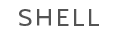
<style>
.page{position:relative;width:115px;height:35px;background:#ffffff}
.page>*{position:absolute;margin:0}
.t1{font:24px "Cabin-Regular";letter-spacing:0.12em;color:#545454}
</style>
<div class="page">
<p class="t1" style="left:19px;top:9px;width:80px;height:17px">SHELL</p>
</div>
